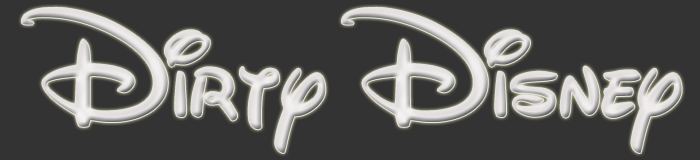
<style>
.page{position:relative;width:700px;height:160px;background:#333333}
.page>*{position:absolute;margin:0}
.t1{font:150px "WaltDisneyScript";color:#e2dede}
</style>
<div class="page">
<p class="t1" style="left:22px;top:7px;width:660px;height:146px">Dirty Disney</p>
</div>
